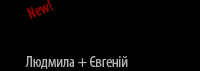
<style>
.page{position:relative;width:200px;height:71px;background:#000000}
.page>*{position:absolute;margin:0}
.t1{font:16px "MyriadPro-Cond";color:#b9b5b5}
</style>
<div class="page">
<p class="t1" style="left:25px;top:56px;width:103px;height:13px">Людмила + Євгеній</p>
</div>
